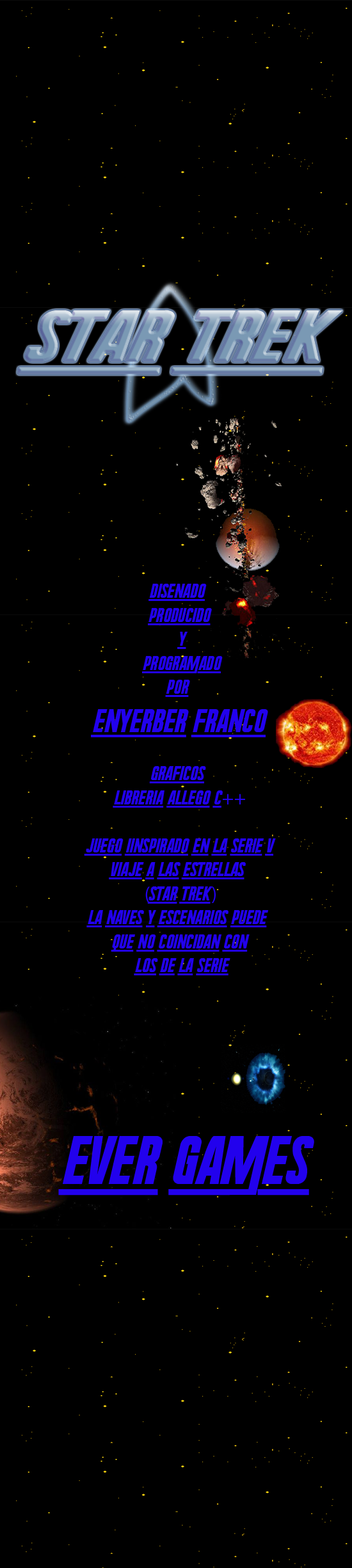
<style>
.page{position:relative;width:352px;height:1568px;background:#000000}
.page>*{position:absolute;margin:0}
.t1{font:72.7px "RadiumCorp";scale:1.34 1}
.t2{font:20px "RadiumCorp";color:#2201ed}
.t3{font:32px "RadiumCorp";color:#2201ed}
.t4{font:20px "MyriadPro-Regular";color:#2201ed}
.t5{font:67.5px "RadiumCorp";color:#2201ed}
</style>
<div class="page">
<p class="t1" style="left:17px;top:310px;width:326px;height:64px">star trek</p>
<p class="t2" style="left:84px;top:584px;width:192px;height:391px;text-align:center">disenado <br>producido<br> y<br> programado<br>por <br><span class="t3">enyerber franco<br></span><br>graficos <br>libreria allego c<span class="t4">++<br></span><br>juego iinspirado en la serie v<br>viaje a las estrellas <br><span class="t4">(</span>star trek<span class="t4">)</span><br>la naves y escenarios puede <br>que no coincidan con<br> los de la serie</p>
<p class="t5" style="left:58px;top:1136px;width:256px;height:60px">ever games</p>
</div>
